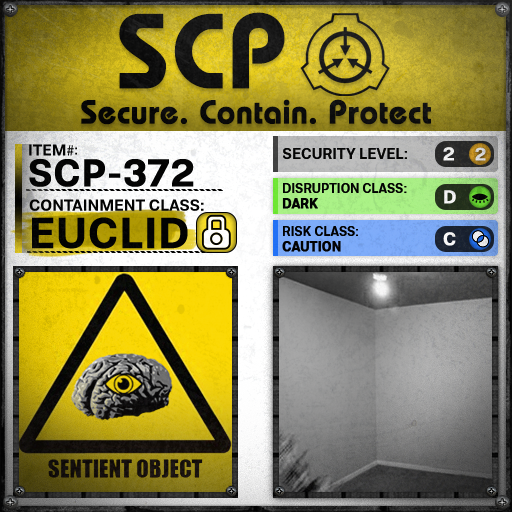
<style>
.page{position:relative;width:512px;height:512px}
.page>*{position:absolute;margin:0}
.t1{font:105.8px "BauhausLT-Demi";color:#000000;font-weight:bold}
.t2{font:33px "BauhausLT-Demi";color:#000000;font-weight:bold}
.t3{font:15.7px "Molde-Semibold";color:#000000}
.t4{font:15.7px "MyriadPro-Regular";color:#000000}
.t5{font:13.7px "Molde-Semibold";color:#000000}
.t6{font:15px "Molde-Semibold";color:#000000}
.t7{font:18.6px "Molde-Semibold";color:#ffffff;font-weight:bold}
.t8{font:17.8px "Molde-Semibold";color:#d7d8d7;font-weight:bold}
.t9{font:38.2px "Molde-Semibold";color:#000000;font-weight:bold}
.t10{font:12.8px "Molde-Semibold";color:#000000}
.t11{font:12.8px "Molde-Semibold";color:#000000;font-weight:bold}
.t12{font:15.9px "Molde-Semibold";color:#000000}
.t13{font:42.8px "Molde-Semibold";color:#000000;font-weight:bold}
</style>
<div class="page">
<p class="t1" style="left:119px;top:12px;width:166px;height:77px">SCP</p>
<p class="t2" style="left:81px;top:99px;width:350px;height:26px">Secure. Contain. Protect</p>
<p class="t3" style="left:29px;top:144px;width:45px;height:12px">ITEM<span class="t4">#</span></p>
<p class="t5" style="left:75px;top:147px;width:2px;height:8px">:</p>
<p class="t6" style="left:283px;top:148px;width:124px;height:11px">SECURITY LEVEL:</p>
<p class="t7" style="left:443px;top:147px;width:11px;height:14px">2</p>
<p class="t8" style="left:475px;top:147px;width:11px;height:14px">2</p>
<p class="t9" style="left:29px;top:159px;width:165px;height:28px">SCP-372</p>
<p class="t10" style="left:282px;top:183px;width:125px;height:26px">DISRUPTION CLASS:<br><span class="t11">DARK</span></p>
<p class="t7" style="left:444px;top:190px;width:12px;height:14px">D</p>
<p class="t12" style="left:29px;top:199px;width:175px;height:12px">CONTAINMENT CLASS:</p>
<p class="t13" style="left:32px;top:217px;width:156px;height:32px">EUCLID</p>
<p class="t10" style="left:282px;top:226px;width:76px;height:26px">RISK CLASS:<br><span class="t11">CAUTION</span></p>
<p class="t7" style="left:443px;top:232px;width:13px;height:14px">C</p>
</div>
